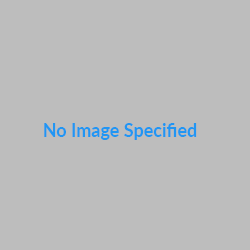
<style>
.page{position:relative;width:250px;height:250px;background:#bdbdbd}
.page>*{position:absolute;margin:0}
.t1{font:18px "Lato-Bold";color:#2196f3}
</style>
<div class="page">
<p class="t1" style="left:44px;top:123px;width:153px;height:17px">No Image Specified</p>
</div>
